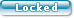
<style>
.page{position:relative;width:74px;height:18px}
.page>*{position:absolute;margin:0}
.t1{font:14px "Verdana";letter-spacing:0.01em;color:#ffffff;font-weight:bold}
</style>
<div class="page">
<p class="t1" style="left:16px;top:3px;width:41px;height:8px">Locked</p>
</div>
